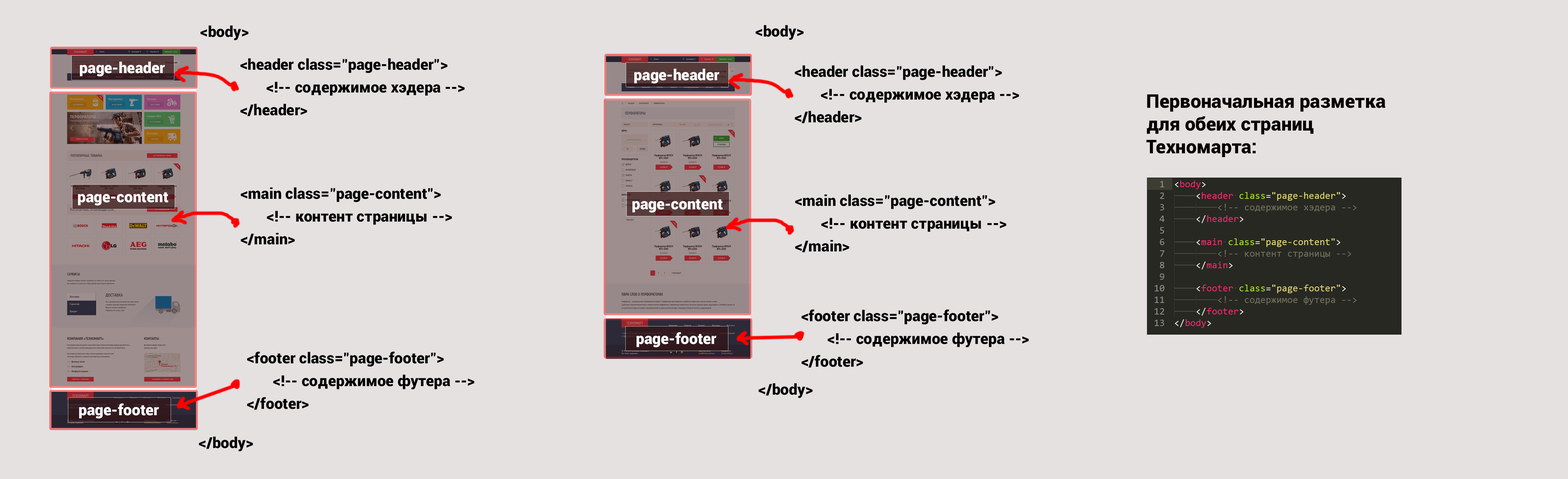
<style>
.page{position:relative;width:1568px;height:479px;background:#e5e1e1}
.page>*{position:absolute;margin:0}
.t1{font:15.1px "Roboto-Black";color:#000000}
.t2{font:15.1px "Roboto-Black";color:#ffffff}
.t3{font:15.1px/22.7px "Roboto-Black";color:#000000}
.t4{font:18.8px/22.7px "Roboto-Black";color:#060000}
</style>
<div class="page">
<p class="t1" style="left:200px;top:25px;width:49px;height:15px">&lt;body&gt;</p>
<p class="t1" style="left:756px;top:25px;width:48px;height:15px">&lt;body&gt;</p>
<p class="t2" style="left:80px;top:62px;width:85px;height:15px">page-header</p>
<p class="t3" style="left:240px;top:58px;width:225px;height:58px">&lt;header class="page-header"&gt;<br>       &lt;!-- содержимое хэдера --&gt;<br>&lt;/header&gt;</p>
<p class="t3" style="left:795px;top:65px;width:224px;height:59px">&lt;header class="page-header"&gt;<br>       &lt;!-- содержимое хэдера --&gt;<br>&lt;/header&gt;</p>
<p class="t2" style="left:634px;top:69px;width:85px;height:15px">page-header</p>
<p class="t4" style="left:1146px;top:94px;width:239px;height:64px">Первоначальная разметка <br>для обеих страниц <br>Техномарта:</p>
<p class="t2" style="left:78px;top:192px;width:90px;height:14px">page-content</p>
<p class="t3" style="left:241px;top:187px;width:211px;height:59px">&lt;main class="page-content"&gt;<br>       &lt;!-- контент страницы --&gt;<br>&lt;/main&gt;</p>
<p class="t3" style="left:795px;top:195px;width:212px;height:58px">&lt;main class="page-content"&gt;<br>       &lt;!-- контент страницы --&gt;<br>&lt;/main&gt;</p>
<p class="t2" style="left:632px;top:199px;width:91px;height:14px">page-content</p>
<p class="t3" style="left:802px;top:309px;width:227px;height:59px">&lt;footer class="page-footer"&gt;<br>       &lt;!-- содержимое футера --&gt;<br>&lt;/footer&gt;</p>
<p class="t2" style="left:637px;top:332px;width:79px;height:16px">page-footer</p>
<p class="t3" style="left:247px;top:352px;width:228px;height:58px">&lt;footer class="page-footer"&gt;<br>       &lt;!-- содержимое футера --&gt;<br>&lt;/footer&gt;</p>
<p class="t1" style="left:759px;top:383px;width:54px;height:15px">&lt;/body&gt;</p>
<p class="t2" style="left:79px;top:404px;width:80px;height:15px">page-footer</p>
<p class="t1" style="left:199px;top:437px;width:54px;height:15px">&lt;/body&gt;</p>
</div>
